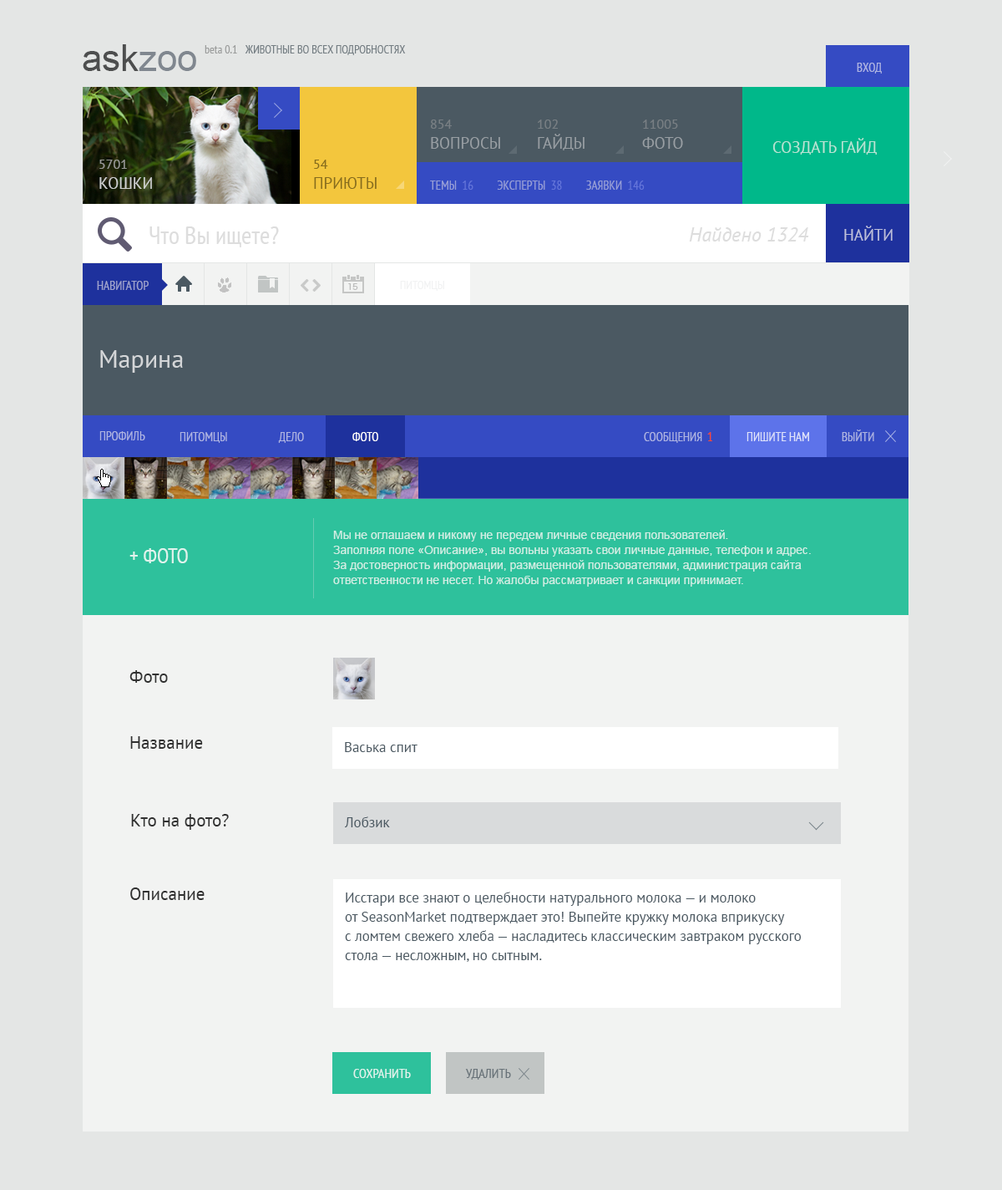
<style>
.page{position:relative;width:1002px;height:1190px;background:#f2f3f2}
.page>*{position:absolute;margin:0}
.t1{font:12.5px "PTSans-Narrow";color:#aeb4e2;text-transform:uppercase}
.t2{font:12.5px "PTSans-Narrow";color:#9ea3cd;text-transform:uppercase}
.t3{font:11.7px "PTSans-Narrow";color:#f1f2f2;text-transform:uppercase}
.t4{font:25.1px "PTSans-Regular";color:#d4d6d8}
.t5{font:12.5px "PTSans-Narrow";color:#ffffff;text-transform:uppercase}
.t6{font:12.5px "PTSans-Narrow";color:#fd482e;text-transform:uppercase}
.t7{font:12.5px "PTSans-Narrow";color:#dfe3fa;text-transform:uppercase}
.t8{font:11.7px/15px "ArialMT";color:#d0eee4}
.t9{font:21.7px "PTSans-Narrow";color:#e0f3ed;text-transform:uppercase}
.t10{font:17.5px "PTSans-Regular";color:#313131}
.t11{font:14.2px "PTSans-Regular";color:#4b5962}
.t12{font:14.2px/19.2px "PTSans-Regular";color:#4b5962}
.t13{font:13.4px "PTSans-Narrow";color:#e0f3ed;text-transform:uppercase}
.t14{font:13.4px "PTSans-Narrow";color:#697379;text-transform:uppercase}
</style>
<div class="page">
<p class="t1" style="left:857px;top:63px;width:25px;height:11px">вход</p>
<p class="t2" style="left:97px;top:281px;width:52px;height:9px">навигатор</p>
<p class="t3" style="left:400px;top:281px;width:44px;height:10px">питомцы</p>
<p class="t4" style="left:100px;top:350px;width:83px;height:23px">Марина</p>
<p class="t1" style="left:99px;top:431px;width:46px;height:9px">профиль</p>
<p class="t1" style="left:180px;top:432px;width:47px;height:11px">питомцы</p>
<p class="t1" style="left:278px;top:432px;width:26px;height:11px">дело</p>
<p class="t5" style="left:353px;top:432px;width:25px;height:9px">фото</p>
<p class="t1" style="left:644px;top:432px;width:59px;height:11px">сообщения</p>
<p class="t6" style="left:708px;top:432px;width:5px;height:9px">1</p>
<p class="t7" style="left:747px;top:432px;width:62px;height:9px">пишите нам</p>
<p class="t1" style="left:842px;top:429px;width:33px;height:12px">выйти</p>
<p class="t8" style="left:333px;top:530px;width:478px;height:56px">Мы не оглашаем и никому не передем личные сведения пользователей. <br>Заполняя поле «Описание», вы вольны указать свои личные данные, телефон и адрес.<br>За достоверность информации, размещенной пользователями, администрация сайта ответственности не несет. Но жалобы рассматривает и санкции принимает.</p>
<p class="t9" style="left:129px;top:548px;width:59px;height:15px">+ фото</p>
<p class="t10" style="left:129px;top:670px;width:39px;height:12px">Фото</p>
<p class="t10" style="left:130px;top:736px;width:73px;height:12px">Название</p>
<p class="t11" style="left:345px;top:742px;width:73px;height:10px">Васька спит</p>
<p class="t10" style="left:131px;top:814px;width:98px;height:16px">Кто на фото?</p>
<p class="t11" style="left:345px;top:816px;width:45px;height:11px">Лобзик</p>
<p class="t10" style="left:130px;top:887px;width:75px;height:13px">Описание</p>
<p class="t12" style="left:345px;top:891px;width:457px;height:70px">Исстари все знают о целебности натурального молока — и молоко <br>от SeasonMarket подтверждает это! Выпейте кружку молока вприкуску <br>с ломтем свежего хлеба — насладитесь классическим завтраком русского <br>стола — несложным, но сытным.</p>
<p class="t13" style="left:353px;top:1068px;width:58px;height:10px">сохранить</p>
<p class="t14" style="left:465px;top:1068px;width:46px;height:11px">Удалить</p>
</div>
